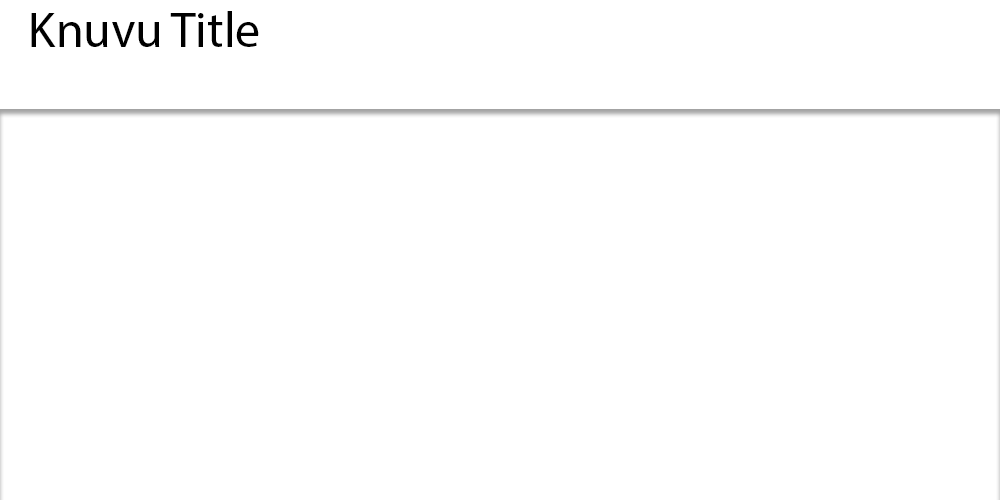
<style>
.page{position:relative;width:1000px;height:500px;background:#ffffff}
.page>*{position:absolute;margin:0}
.t1{font:12px "MyriadPro-Regular";color:#000000}
</style>
<div class="page">
<p class="t1" style="left:31px;top:11px;width:228px;height:36px">Knuvu Title</p>
</div>
